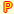
<style>
.page{position:relative;width:14px;height:14px;background:#f6fdd7}
.page>*{position:absolute;margin:0}
.t1{font:14px "Corporate-Logo-Medium";letter-spacing:-0.06em;color:#fffc00}
</style>
<div class="page">
<p class="t1" style="left:4px;top:2px;width:8px;height:10px">P</p>
</div>
